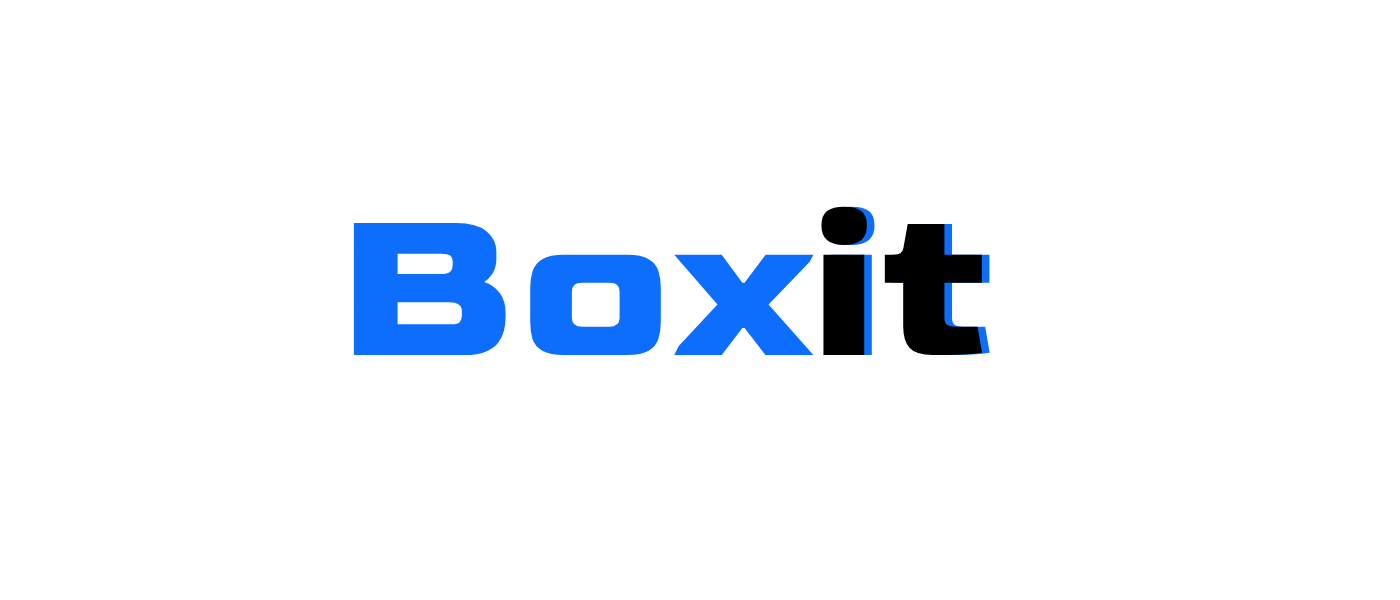
<style>
.page{position:relative;width:1400px;height:600px;background:#ffffff}
.page>*{position:absolute;margin:0}
.t1{font:224px "Goldman-Bold";color:#0d6efd}
.t2{font:224px "Goldman-Bold";color:#000000}
</style>
<div class="page">
<p class="t1" style="left:353px;top:206px;width:637px;height:149px">Boxit</p>
<p class="t2" style="left:821px;top:206px;width:162px;height:149px">it</p>
</div>
